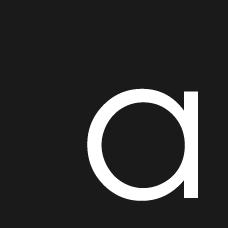
<style>
.page{position:relative;width:228px;height:228px;background:#1a1a1a}
.page>*{position:absolute;margin:0}
.t1{font:200px "CenturyGothic";color:#ffffff}
</style>
<div class="page">
<p class="t1" style="left:87px;top:88px;width:111px;height:113px">a</p>
</div>
